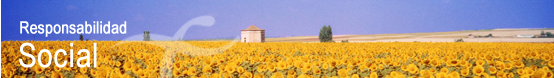
<style>
.page{position:relative;width:554px;height:78px}
.page>*{position:absolute;margin:0}
.t1{font:16.7px "ArialNarrow";color:#ffffff;font-weight:bold}
.t2{font:34px "ArialNarrow";color:#ffffff;font-weight:bold}
</style>
<div class="page">
<p class="t1" style="left:20px;top:21px;width:107px;height:16px">Responsabilidad</p>
<p class="t2" style="left:19px;top:42px;width:78px;height:26px">Social</p>
</div>
